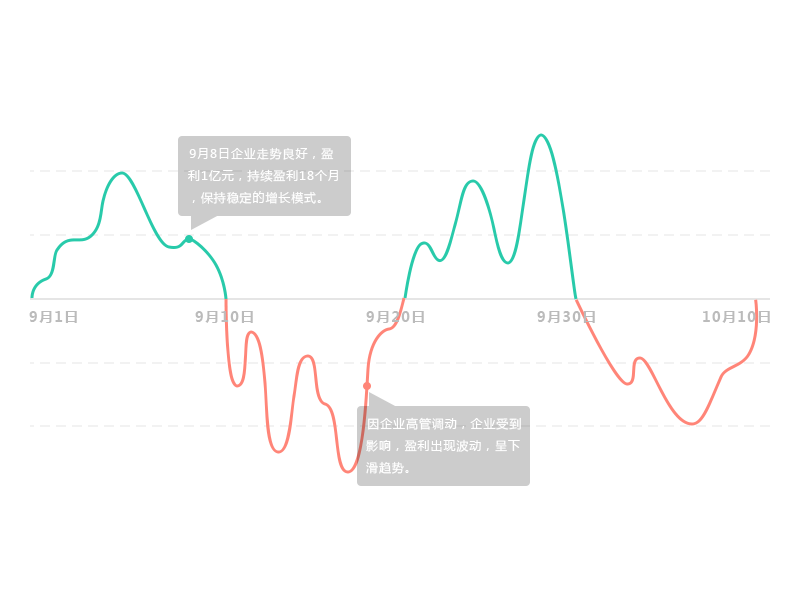
<style>
.page{position:relative;width:800px;height:600px;background:#ffffff}
.page>*{position:absolute;margin:0}
.t1{font:12px/22px "MicrosoftYaHei";letter-spacing:0.075em;color:#ffffff}
.t2{font:14px "MicrosoftYaHei-Bold";letter-spacing:0.075em;color:#bbbbbb}
</style>
<div class="page">
<p class="t1" style="left:188px;top:147px;width:150px;height:57px">9月8日企业走势良好，盈利1亿元，持续盈利18个月，保持稳定的增长模式。</p>
<p class="t2" style="left:29px;top:311px;width:48px;height:12px">9月1日</p>
<p class="t2" style="left:195px;top:311px;width:58px;height:12px">9月10日</p>
<p class="t2" style="left:366px;top:311px;width:58px;height:12px">9月20日</p>
<p class="t2" style="left:537px;top:311px;width:58px;height:12px">9月30日</p>
<p class="t2" style="left:703px;top:311px;width:67px;height:12px">10月10日</p>
<p class="t1" style="left:366px;top:417px;width:155px;height:57px">因企业高管调动，企业受到影响，盈利出现波动，呈下滑趋势。</p>
</div>
